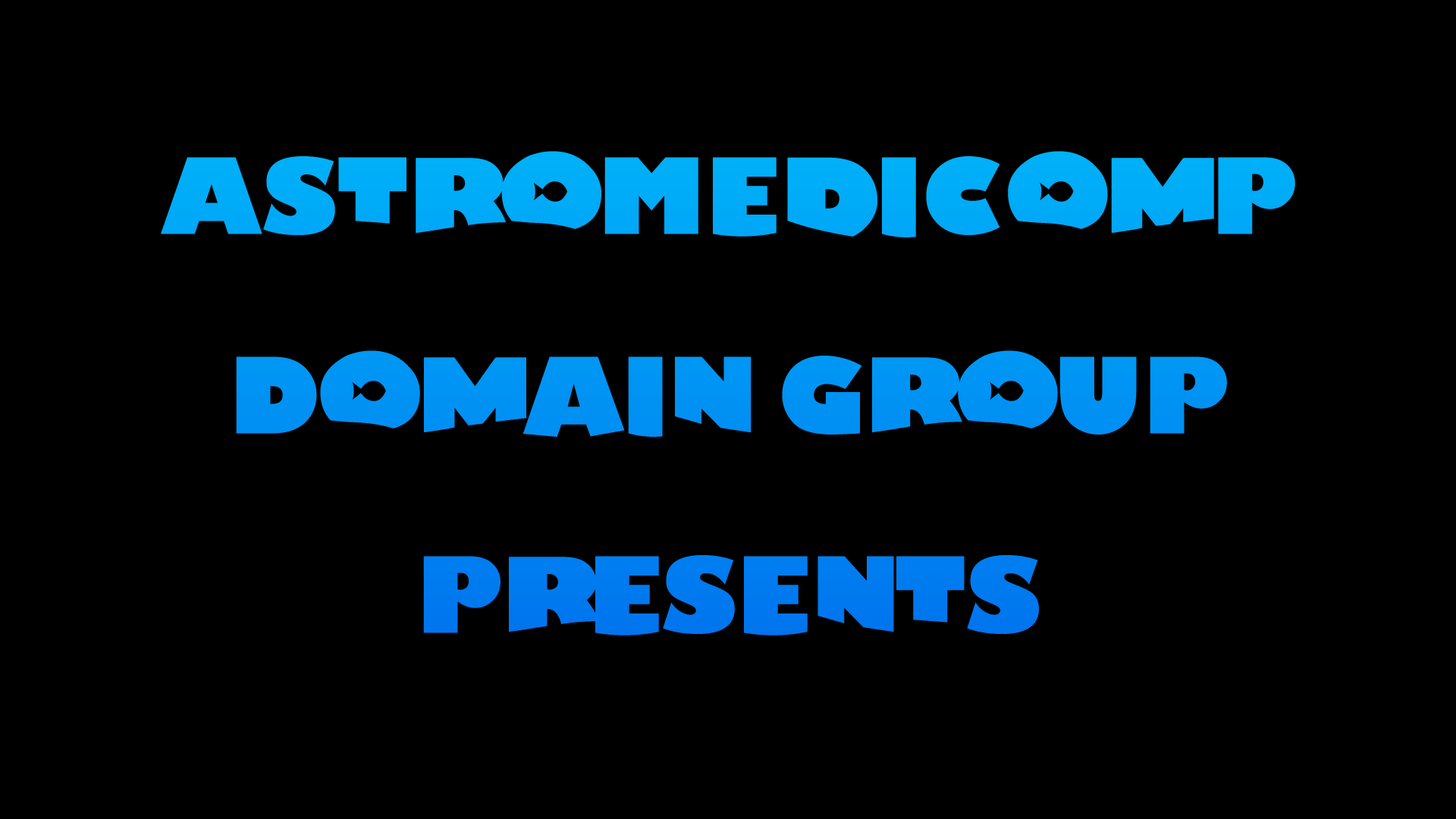
<style>
.page{position:relative;width:1456px;height:819px;background:#000000}
.page>*{position:absolute;margin:0}
.t1{font:102.4px "LostFish";color:#00acf7}
.t2{font:102.4px "LostFish";color:#0093f4}
.t3{font:102.4px "LostFish";color:#007aef}
</style>
<div class="page">
<p class="t1" style="left:161px;top:151px;width:1134px;height:86px">AstroMediComP</p>
<p class="t2" style="left:236px;top:350px;width:991px;height:87px">Domain Group</p>
<p class="t3" style="left:423px;top:555px;width:616px;height:80px">Presents</p>
</div>
